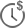
<style>
.page{position:relative;width:25px;height:28px;background:#ffffff}
.page>*{position:absolute;margin:0}
.t1{font:12.3px "Helvetica-Bold";letter-spacing:0.04em;color:#666666}
</style>
<div class="page">
<p class="t1" style="left:16px;top:0px;width:7px;height:11px">$</p>
</div>
